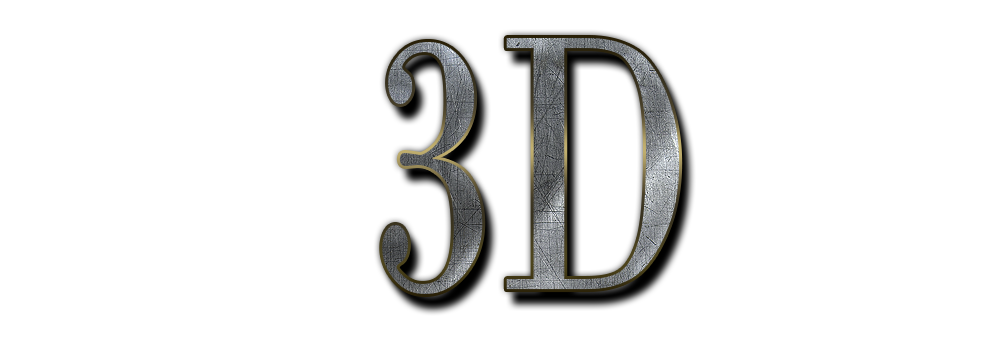
<style>
.page{position:relative;width:1000px;height:353px;background:#ffffff}
.page>*{position:absolute;margin:0}
.t1{font:384.1px "BodoniMT";scale:0.69 1}
</style>
<div class="page">
<p class="t1" style="left:382px;top:38px;width:298px;height:256px">3D</p>
</div>
